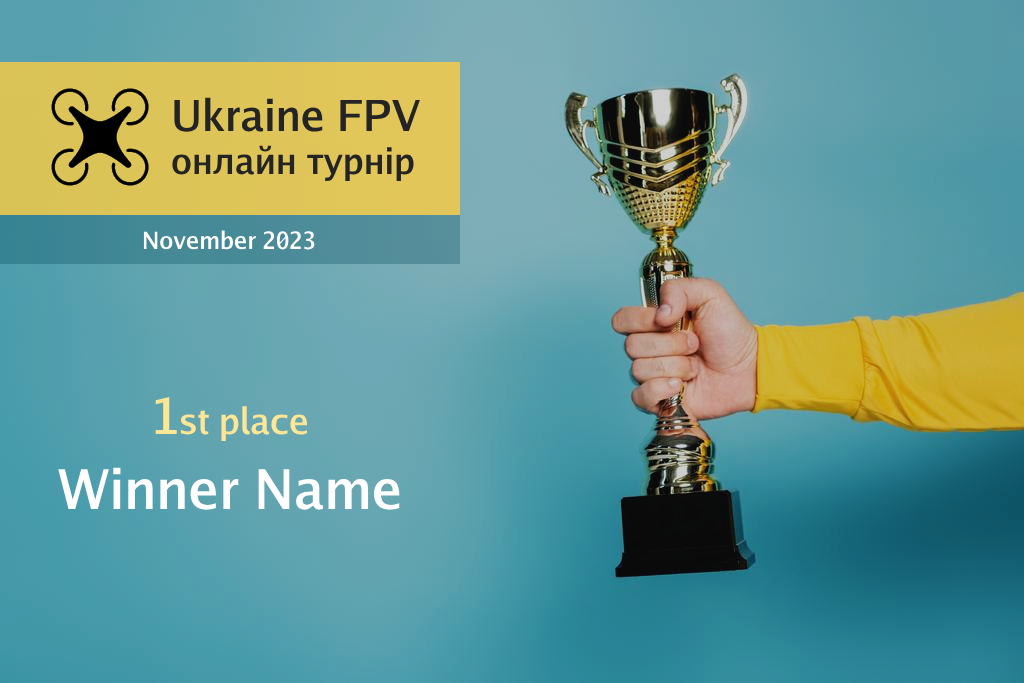
<style>
.page{position:relative;width:1024px;height:683px}
.page>*{position:absolute;margin:0}
.t1{font:36px "GoMedium";color:#242424}
.t2{font:43px "GoMedium";color:#242424}
.t3{font:24px "GoMedium";color:#ffffff}
.t4{font:36px "GoMedium";color:#ffe695}
.t5{font:50px "GoMedium";color:#ffe695}
.t6{font:55px "GoMedium";color:#ffffff}
</style>
<div class="page">
<p class="t1" style="left:172px;top:97px;width:248px;height:84px"><span class="t2">Ukraine FPV<br></span>онлайн турнір</p>
<p class="t3" style="left:143px;top:230px;width:172px;height:20px">November 2023</p>
<p class="t4" style="left:155px;top:396px;width:153px;height:45px"><span class="t5">1</span>st place</p>
<p class="t6" style="left:58px;top:467px;width:342px;height:43px">Winner Name</p>
</div>
